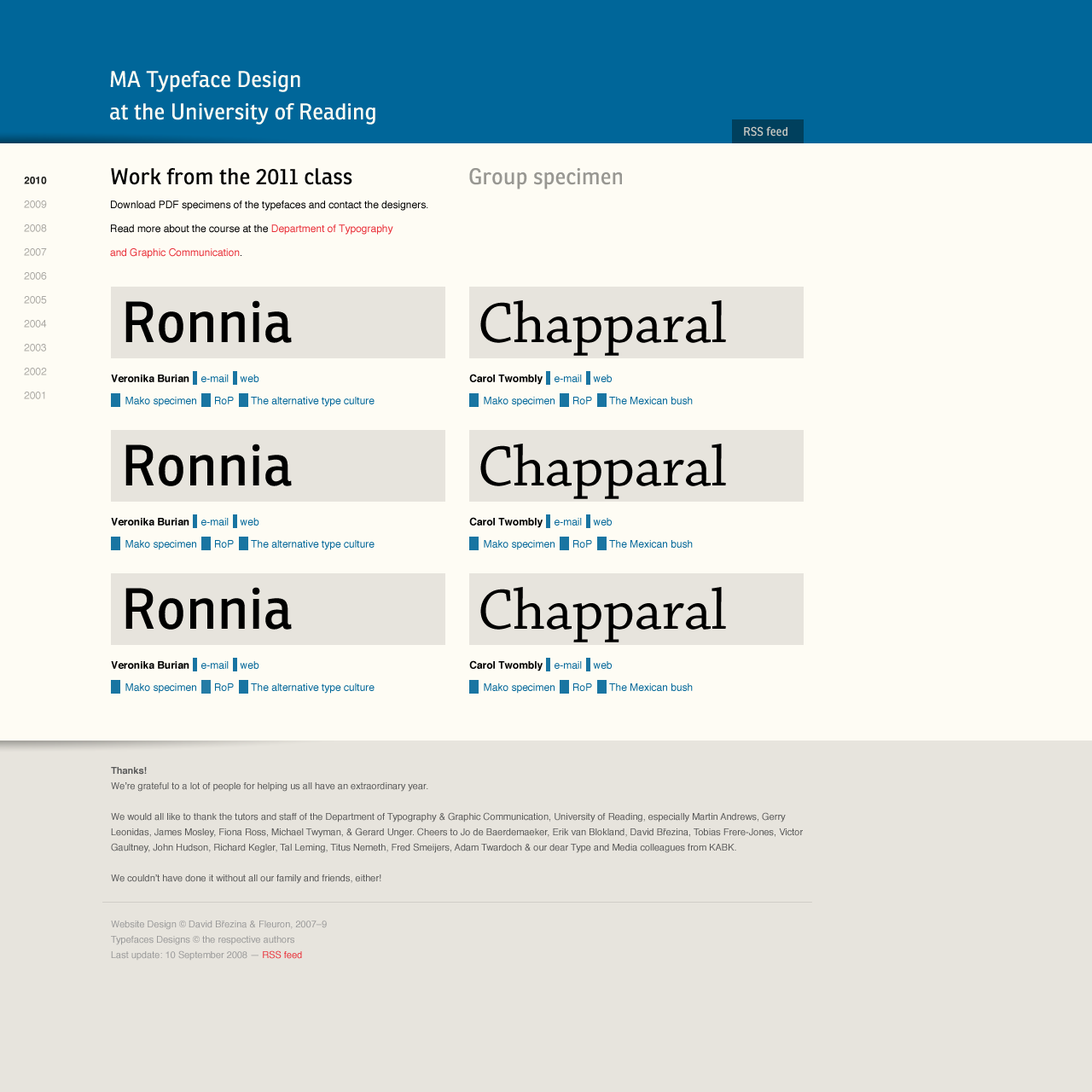
<style>
.page{position:relative;width:1092px;height:1092px;background:#e7e4dd}
.page>*{position:absolute;margin:0}
.t1{font:22.2px/32.4px "Ronnia-Regular";color:#fefcf4}
.t2{font:11.9px "Ronnia-Regular";color:#cbcac3}
.t3{font:10.2px/23.9px "Helvetica";color:#000000}
.t4{font:22.2px/23.9px "Ronnia-Regular";color:#000000}
.t5{font:10.2px/23.9px "Helvetica";color:#e92f38}
.t6{font:22.2px "Ronnia-Regular";color:#989792}
.t7{font:10.2px/23.9px "Helvetica";color:#aaa8a3}
.t8{font:10.2px/23.9px "Helvetica-Bold";color:#242422}
.t9{font:56.3px "Ronnia-Regular";color:#000000}
.t10{font:59.7px "ChaparralPro-Regular";color:#000000}
.t11{font:10.2px/22.2px "Helvetica";color:#006699}
.t12{font:10.2px/22.2px "Helvetica-Bold";color:#010101}
.t13{font:10.2px/22.2px "Helvetica-Bold";color:#000000}
.t14{font:9.4px/15.4px "Helvetica";color:#585858}
.t15{font:9.4px/15.4px "Helvetica-Bold";color:#585858}
.t16{font:9.4px/15.4px "Helvetica";color:#999999}
.t17{font:9.4px/15.4px "Helvetica";color:#e92f38}
</style>
<div class="page">
<p class="t1" style="left:110px;top:71px;width:265px;height:54px">MA Typeface Design<br>at the University of Reading</p>
<p class="t2" style="left:744px;top:126px;width:43px;height:10px">RSS feed</p>
<p class="t3" style="left:110px;top:168px;width:318px;height:90px"><span class="t4">Work from the 2011 class<br></span>Download PDF specimens of the typefaces and contact the designers.<br>Read more about the course at the <span class="t5">Department of Typography<br>and Graphic Communication</span>.</p>
<p class="t6" style="left:469px;top:168px;width:153px;height:21px">Group specimen</p>
<p class="t7" style="left:24px;top:177px;width:23px;height:222px"><span class="t8">2010<br></span>2009<br>2008<br>2007<br>2006<br>2005<br>2004<br>2003<br>2002<br>2001<br>2000</p>
<p class="t9" style="left:125px;top:300px;width:167px;height:43px">Ronnia</p>
<p class="t10" style="left:480px;top:300px;width:246px;height:56px">Chapparal</p>
<p class="t11" style="left:111px;top:375px;width:264px;height:32px"><span class="t12">Veronika Burian    </span>e-mail    web<br>     Mako specimen      RoP      The alternative type culture</p>
<p class="t11" style="left:469px;top:374px;width:224px;height:33px"><span class="t13">Carol Twombly    </span>e-mail    web<br>     Mako specimen      RoP      The Mexican bush</p>
<p class="t9" style="left:125px;top:444px;width:167px;height:42px">Ronnia</p>
<p class="t10" style="left:480px;top:444px;width:246px;height:55px">Chapparal</p>
<p class="t11" style="left:111px;top:518px;width:264px;height:32px"><span class="t12">Veronika Burian    </span>e-mail    web<br>     Mako specimen      RoP      The alternative type culture</p>
<p class="t11" style="left:469px;top:517px;width:224px;height:33px"><span class="t12">Carol Twombly  </span>  e-mail    web<br>     Mako specimen      RoP      The Mexican bush</p>
<p class="t9" style="left:125px;top:587px;width:167px;height:43px">Ronnia</p>
<p class="t10" style="left:480px;top:587px;width:246px;height:55px">Chapparal</p>
<p class="t11" style="left:111px;top:661px;width:264px;height:33px"><span class="t12">Veronika Burian    </span>e-mail    web<br>     Mako specimen      RoP      The alternative type culture</p>
<p class="t11" style="left:469px;top:660px;width:224px;height:34px"><span class="t12">Carol Twombly    </span>e-mail    web<br>     Mako specimen      RoP      The Mexican bush</p>
<p class="t14" style="left:111px;top:767px;width:692px;height:194px"><span class="t15">Thanks!<br></span>We’re grateful to a lot of people for helping us all have an extraordinary year.<br><br>We would all like to thank the tutors and staff of the Department of Typography &amp; Graphic Communication, University of Reading, especially Martin Andrews, Gerry Leonidas, James Mosley, Fiona Ross, Michael Twyman, &amp; Gerard Unger. Cheers to Jo de Baerdemaeker, Erik van Blokland, David Březina, Tobias Frere-Jones, Victor Gaultney, John Hudson, Richard Kegler, Tal Leming, Titus Nemeth, Fred Smeijers, Adam Twardoch &amp; our dear Type and Media colleagues from KABK.<br><br>We couldn’t have done it without all our family and friends, either!<br><span class="t16"><br><br>Website Design © David Březina &amp; Fleuron, 2007–9<br>Typefaces Designs © the respective authors<br>Last update: 10 September 2008 — </span><span class="t17">RSS feed</span></p>
</div>
